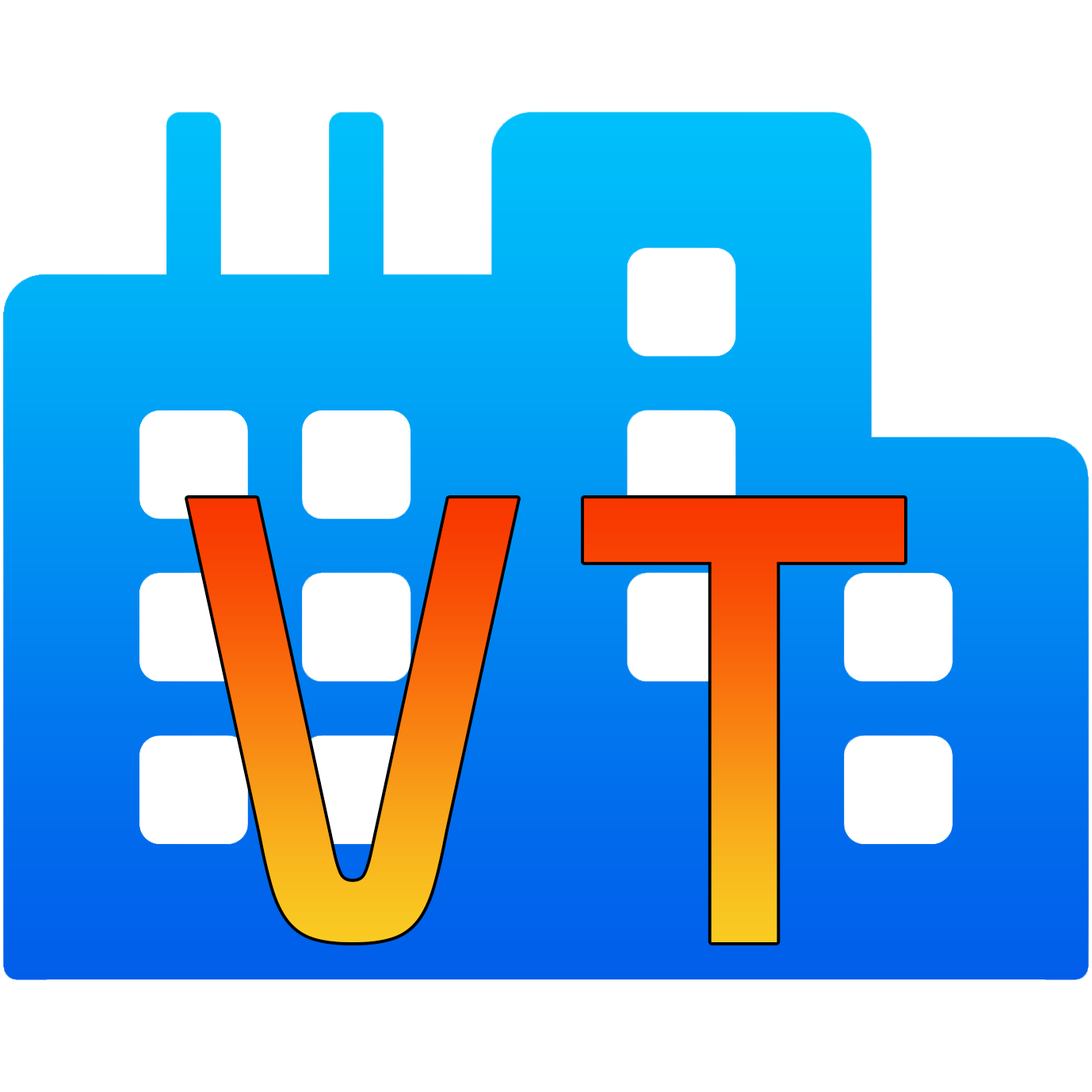
<style>
.page{position:relative;width:1092px;height:1092px;background:#ffffff}
.page>*{position:absolute;margin:0}
.t1{font:634px "MaterialSans-Medium";letter-spacing:0.005em}
</style>
<div class="page">
<p class="t1" style="left:188px;top:498px;width:716px;height:444px">VT</p>
</div>
